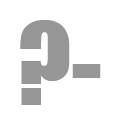
<style>
.page{position:relative;width:128px;height:128px;background:#ffffff}
.page>*{position:absolute;margin:0}
.t1{font:105.4px "Impact";color:#7e7e7e}
</style>
<div class="page">
<p class="t1" style="left:20px;top:20px;width:81px;height:85px;opacity:0.81">?-</p>
</div>
